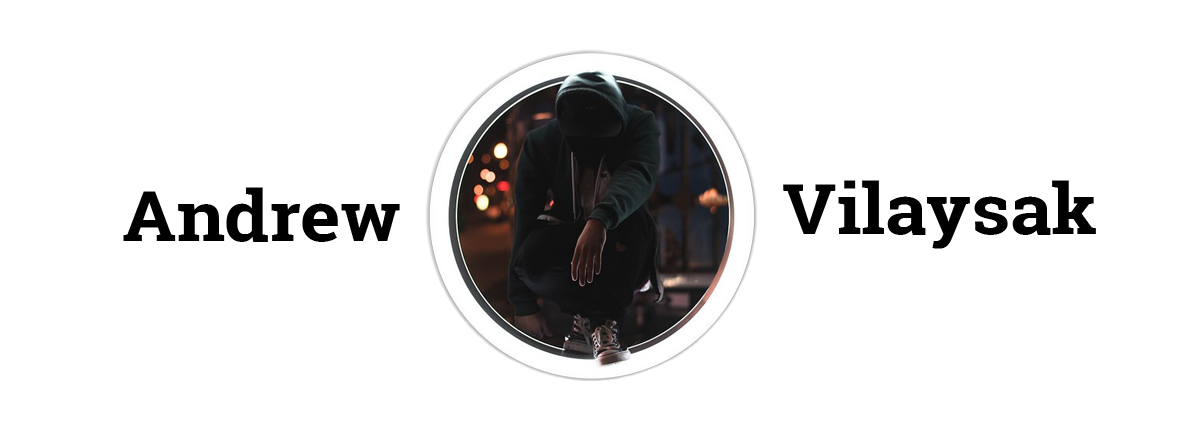
<style>
.page{position:relative;width:1200px;height:427px;background:#ffffff}
.page>*{position:absolute;margin:0}
.t1{font:70px "RobotoSlab-Bold";color:#000000;scale:1.08 1}
</style>
<div class="page">
<p class="t1" style="left:783px;top:180px;width:313px;height:69px">Vilaysak</p>
<p class="t1" style="left:123px;top:187px;width:277px;height:55px">Andrew</p>
</div>
